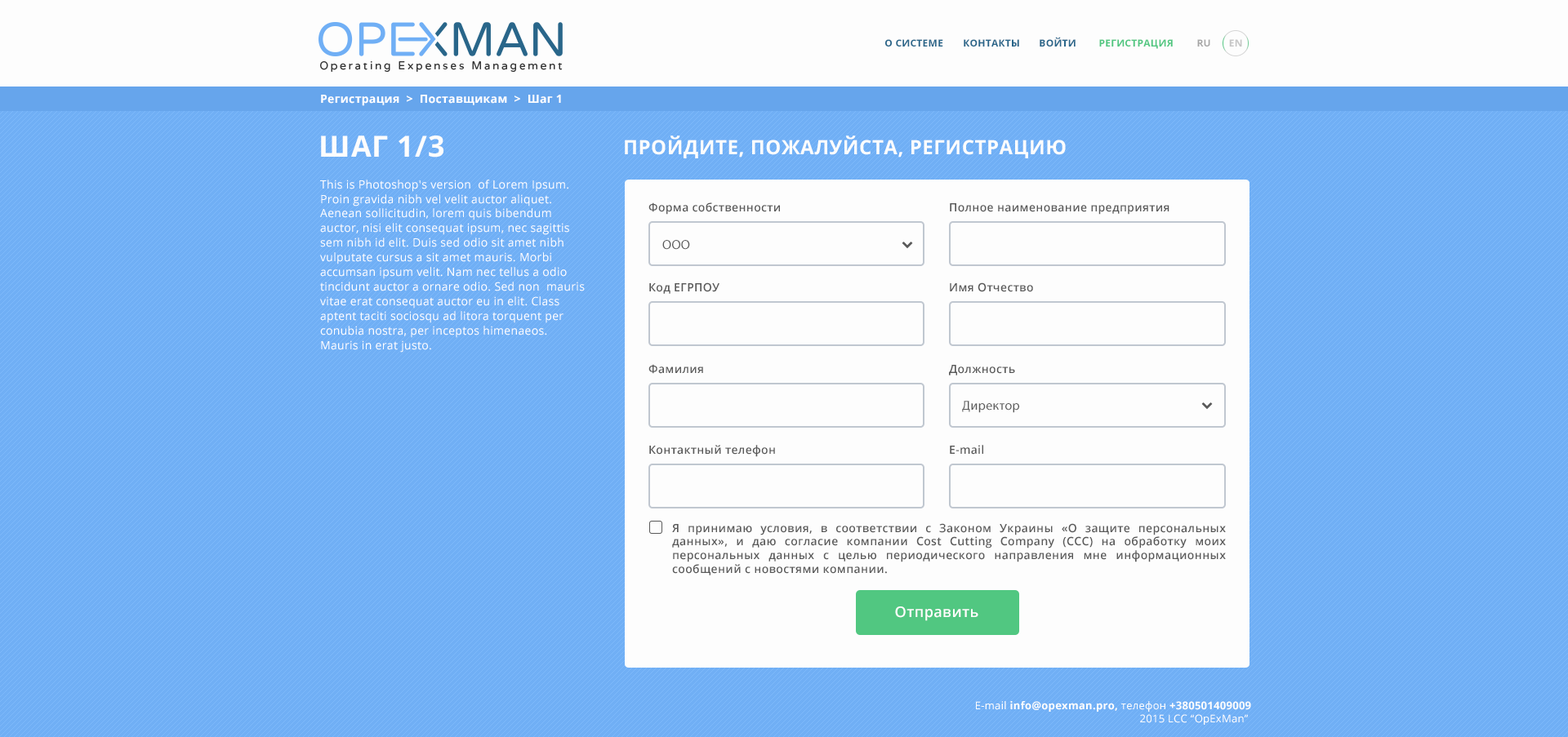
<style>
.page{position:relative;width:1568px;height:737px;background:#fdfdfd}
.page>*{position:absolute;margin:0}
.t1{font:9.8px "OpenSans-Bold";letter-spacing:0.025em;color:#29668a;text-transform:uppercase}
.t2{font:9.8px "OpenSans-Bold";letter-spacing:0.025em;color:#51c781;text-transform:uppercase}
.t3{font:9.8px "OpenSans-Bold";letter-spacing:0.025em;color:#a7a7a7;text-transform:uppercase}
.t4{font:9.8px "OpenSans-Bold";letter-spacing:0.025em;color:#c6c6c6;text-transform:uppercase}
.t5{font:11.4px "OpenSans-Bold";letter-spacing:0.025em;color:#ffffff}
.t6{font:29.3px "OpenSans-Bold";letter-spacing:0.025em;color:#fdfdfd;text-transform:uppercase}
.t7{font:19.5px "OpenSans-Bold";letter-spacing:0.025em;color:#fdfdfd;text-transform:uppercase}
.t8{font:11.4px/14.6px "OpenSans";letter-spacing:0.025em;color:#ffffff}
.t9{font:11.4px "OpenSans-Semibold";letter-spacing:0.025em;color:#595959}
.t10{font:13px "MyriadPro-Regular";letter-spacing:0.025em;color:#595959}
.t11{font:14.6px "OpenSans-Semibold";letter-spacing:0.025em;color:#fefdfd}
.t12{font:10.6px "OpenSans";letter-spacing:0.025em;color:#fdfdfd}
.t13{font:10.6px "OpenSans-Bold";letter-spacing:0.025em;color:#fdfdfd}
</style>
<div class="page">
<p class="t1" style="left:885px;top:39px;width:58px;height:8px">О системе</p>
<p class="t1" style="left:964px;top:39px;width:55px;height:8px">Контакты</p>
<p class="t1" style="left:1040px;top:37px;width:36px;height:10px">Войти</p>
<p class="t2" style="left:1099px;top:39px;width:74px;height:10px">РЕГИСТРация</p>
<p class="t3" style="left:1197px;top:39px;width:13px;height:8px">Ru</p>
<p class="t4" style="left:1229px;top:39px;width:13px;height:8px">EN</p>
<p class="t5" style="left:321px;top:95px;width:240px;height:11px">Регистрация  &gt;  Поставщикам  &gt;  Шаг 1</p>
<p class="t6" style="left:321px;top:136px;width:122px;height:22px">Шаг 1/3</p>
<p class="t7" style="left:625px;top:136px;width:441px;height:22px">Пройдите, пожалуйста, регистрацию</p>
<p class="t8" style="left:320px;top:180px;width:265px;height:173px">This is Photoshop's version  of Lorem Ipsum. Proin gravida nibh vel velit auctor aliquet. Aenean sollicitudin, lorem quis bibendum auctor, nisi elit consequat ipsum, nec sagittis sem nibh id elit. Duis sed odio sit amet nibh vulputate cursus a sit amet mauris. Morbi accumsan ipsum velit. Nam nec tellus a odio tincidunt auctor a ornare odio. Sed non  mauris vitae erat consequat auctor eu in elit. Class aptent taciti sociosqu ad litora torquent per conubia nostra, per inceptos himenaeos. Mauris in erat justo. <br>Nullam ac urna eu felis dapibus condimentum sit amet a augue. Sed non neque elit. Sed ut imperdiet nisi. Proin condimentum fermentum nunc. Etiam pharetra, erat sed fermentum feugiat, velit mauris egestas quam, ut aliquam massa nisl quis neque. Suspendisse in orci enim.</p>
<p class="t9" style="left:648px;top:203px;width:132px;height:12px">Форма собственности</p>
<p class="t9" style="left:950px;top:203px;width:219px;height:12px">Полное наименование предприятия</p>
<p class="t10" style="left:662px;top:240px;width:28px;height:10px">ООО</p>
<p class="t9" style="left:649px;top:283px;width:70px;height:11px">Код ЕГРПОУ</p>
<p class="t9" style="left:950px;top:283px;width:83px;height:9px">Имя Отчество</p>
<p class="t9" style="left:648px;top:364px;width:55px;height:10px">Фамилия</p>
<p class="t9" style="left:949px;top:365px;width:66px;height:11px">Должность</p>
<p class="t10" style="left:962px;top:401px;width:57px;height:12px">Директор</p>
<p class="t9" style="left:649px;top:445px;width:126px;height:12px">Контактный телефон</p>
<p class="t9" style="left:950px;top:445px;width:33px;height:10px">E-mail</p>
<p class="t9" style="left:672px;top:523px;width:554px;height:53px;text-align:justify">Я принимаю условия, в соответствии с Законом Украины «О защите персональных данных», и даю согласие компании Cost Cutting Company (CCC) на обработку моих персональных данных с целью периодического направления мне информационных сообщений с новостями компании.</p>
<p class="t11" style="left:895px;top:607px;width:83px;height:14px">Отправить</p>
<p class="t12" style="left:976px;top:702px;width:275px;height:23px;text-align:right">E-mail <span class="t13">info@opexman.pro, </span>телефон <span class="t13">+380501409009<br></span>2015 LCC “OpExMan”</p>
</div>
